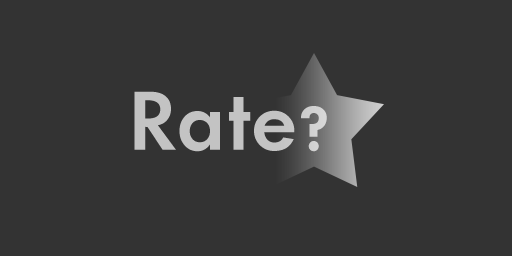
<style>
.page{position:relative;width:512px;height:256px;background:#333333}
.page>*{position:absolute;margin:0}
.t1{font:77px "AFuturicaLtSemiBold";letter-spacing:0.05em;color:#c3c3c3}
.t2{font:57px "AFuturicaLtSemiBold";letter-spacing:0.05em;color:#d2d2d2}
</style>
<div class="page">
<p class="t1" style="left:134px;top:91px;width:161px;height:61px">Rate</p>
<p class="t2" style="left:301px;top:106px;width:26px;height:46px">?</p>
</div>
